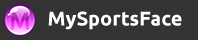
<style>
.page{position:relative;width:198px;height:40px;background:#333333}
.page>*{position:absolute;margin:0}
.t1{font:20px "Ubuntu-Bold";color:#ffffff}
</style>
<div class="page">
<p class="t1" style="left:48px;top:11px;width:134px;height:19px">MySportsFace</p>
</div>
